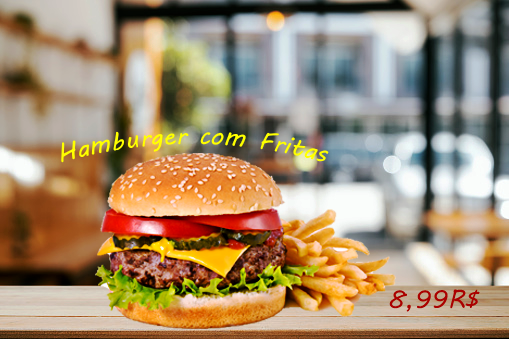
<style>
.page{position:relative;width:509px;height:339px}
.page>*{position:absolute;margin:0}
.t1{font:25px "MVBoli";color:#ffff00}
.t2{font:25px "MVBoli";color:#b40000}
</style>
<div class="page">
<p class="t1" style="left:61px;top:131px;width:268px;height:32px">Hamburger com Fritas</p>
<p class="t2" style="left:389px;top:289px;width:91px;height:23px">8,99R$</p>
</div>
